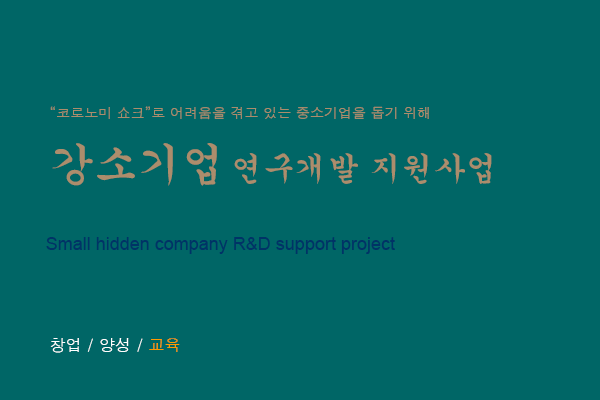
<style>
.page{position:relative;width:600px;height:400px;background:#006666}
.page>*{position:absolute;margin:0}
.t1{font:14px "Dotum";color:#ac8d6c}
.t2{font:32px "Gungsuh";color:#ac8d6c}
.t3{font:44px "Gungsuh";color:#ac8d6c}
.t4{font:18px "ArialMT";color:#003366}
.t5{font:16px "Dotum";color:#ffffff}
.t6{font:16px "Dotum";color:#ff9900}
</style>
<div class="page">
<p class="t1" style="left:50px;top:106px;width:379px;height:14px">“코로노미 쇼크”로 어려움을 겪고 있는 중소기업을 돕기 위해</p>
<p class="t2" style="left:52px;top:143px;width:440px;height:43px"><span class="t3">강소기업 </span>연구개발 지원사업</p>
<p class="t4" style="left:46px;top:237px;width:349px;height:17px">Small hidden company R&amp;D support project</p>
<p class="t5" style="left:50px;top:338px;width:130px;height:15px">창업 / 양성 / <span class="t6">교육</span></p>
</div>
